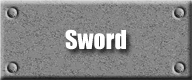
<style>
.page{position:relative;width:192px;height:80px}
.page>*{position:absolute;margin:0}
.t1{font:24px "Impact";color:#ffffff}
</style>
<div class="page">
<p class="t1" style="left:65px;top:29px;width:61px;height:21px">Sword</p>
</div>
